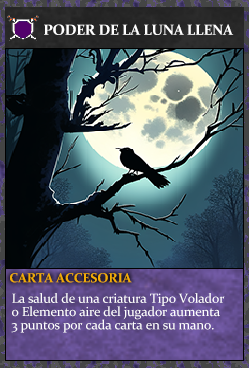
<style>
.page{position:relative;width:249px;height:368px}
.page>*{position:absolute;margin:0}
.t1{font:14.7px "Constantia-Bold";letter-spacing:-0.02em;color:#ffffff}
.t2{font:13.3px "Constantia-Bold";letter-spacing:-0.02em;color:#f2ac05}
.t3{font:13.3px/13.3px "Constantia";letter-spacing:-0.02em;color:#ffffff}
</style>
<div class="page">
<p class="t1" style="left:44px;top:24px;width:190px;height:11px">PODER DE LA LUNA LLENA</p>
<p class="t2" style="left:10px;top:273px;width:122px;height:10px">CARTA ACCESORIA</p>
<p class="t3" style="left:11px;top:293px;width:214px;height:40px">La salud de una criatura Tipo Volador<br>o Elemento aire del jugador aumenta<br>3 puntos por cada carta en su mano.</p>
</div>
